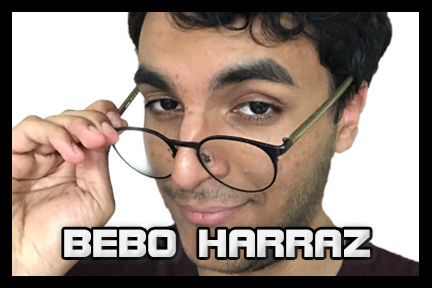
<style>
.page{position:relative;width:432px;height:288px;background:#ffffff}
.page>*{position:absolute;margin:0}
.t1{font:41.7px "BolsterBold";color:#f3f3f3}
</style>
<div class="page">
<p class="t1" style="left:64px;top:229px;width:306px;height:28px">BEBO HARRAZ</p>
</div>
